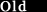
<style>
.page{position:relative;width:47px;height:12px;background:#000000}
.page>*{position:absolute;margin:0}
.t1{font:14px "Georgia";letter-spacing:0.1em;color:#ffffff;font-weight:bold}
</style>
<div class="page">
<p class="t1" style="left:0px;top:0px;width:27px;height:12px">Old</p>
</div>
